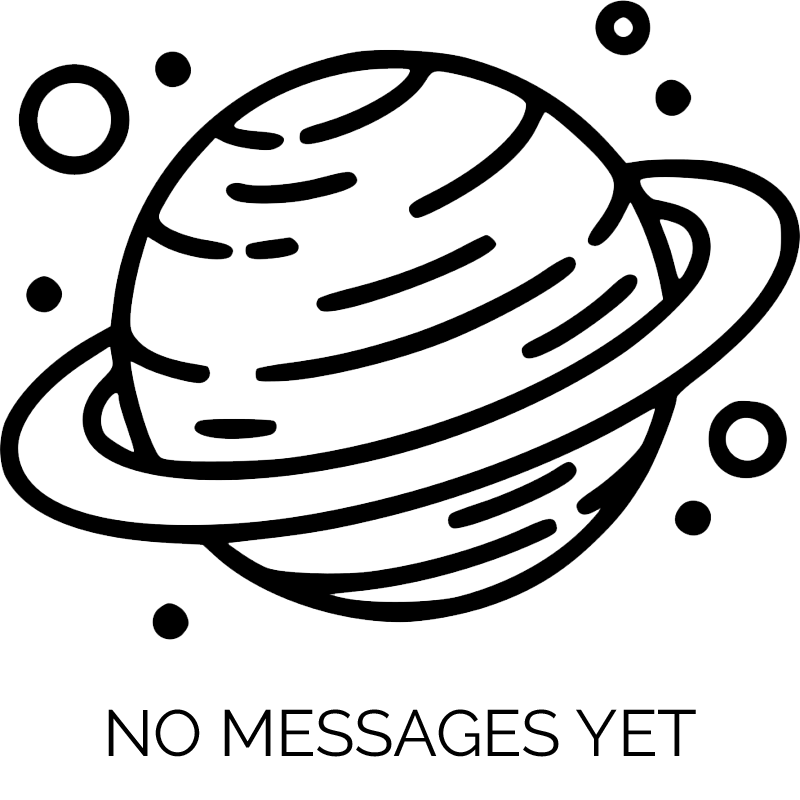
<style>
.page{position:relative;width:800px;height:800px;background:#ffffff}
.page>*{position:absolute;margin:0}
.t1{font:64.9px "Raleway-Regular";color:#000000}
</style>
<div class="page">
<p class="t1" style="left:108px;top:709px;width:588px;height:48px">NO MESSAGES YET</p>
</div>
